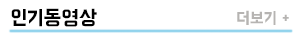
<style>
.page{position:relative;width:301px;height:36px;background:#ffffff}
.page>*{position:absolute;margin:0}
.t1{font:20.8px "BMHANNA11yrsold";color:#000000}
.t2{font:16.7px "BMHANNA11yrsold";color:#b6b4b2}
</style>
<div class="page">
<p class="t1" style="left:11px;top:8px;width:86px;height:19px">인기동영상</p>
<p class="t2" style="left:237px;top:10px;width:52px;height:15px">더보기 +</p>
</div>
